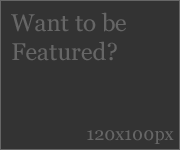
<style>
.page{position:relative;width:180px;height:150px;background:#333333}
.page>*{position:absolute;margin:0}
.t1{font:24px "Georgia";color:#666666}
.t2{font:18px "Georgia";color:#666666}
</style>
<div class="page">
<p class="t1" style="left:11px;top:12px;width:115px;height:49px">Want to be<br>Featured?</p>
<p class="t2" style="left:87px;top:130px;width:87px;height:14px">120x100px</p>
</div>
